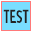
<style>
.page{position:relative;width:32px;height:32px;background:#79deff}
.page>*{position:absolute;margin:0}
.t1{font:16px "BlueSheepLego-Regular";color:#232323}
</style>
<div class="page">
<p class="t1" style="left:3px;top:9px;width:26px;height:14px">TEST</p>
</div>
